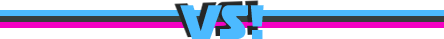
<style>
.page{position:relative;width:444px;height:39px;background:#ffffff}
.page>*{position:absolute;margin:0}
.t1{font:48px "StarJedi";color:#4bb9ff}
</style>
<div class="page">
<p class="t1" style="left:180px;top:5px;width:84px;height:34px">vs!</p>
</div>
